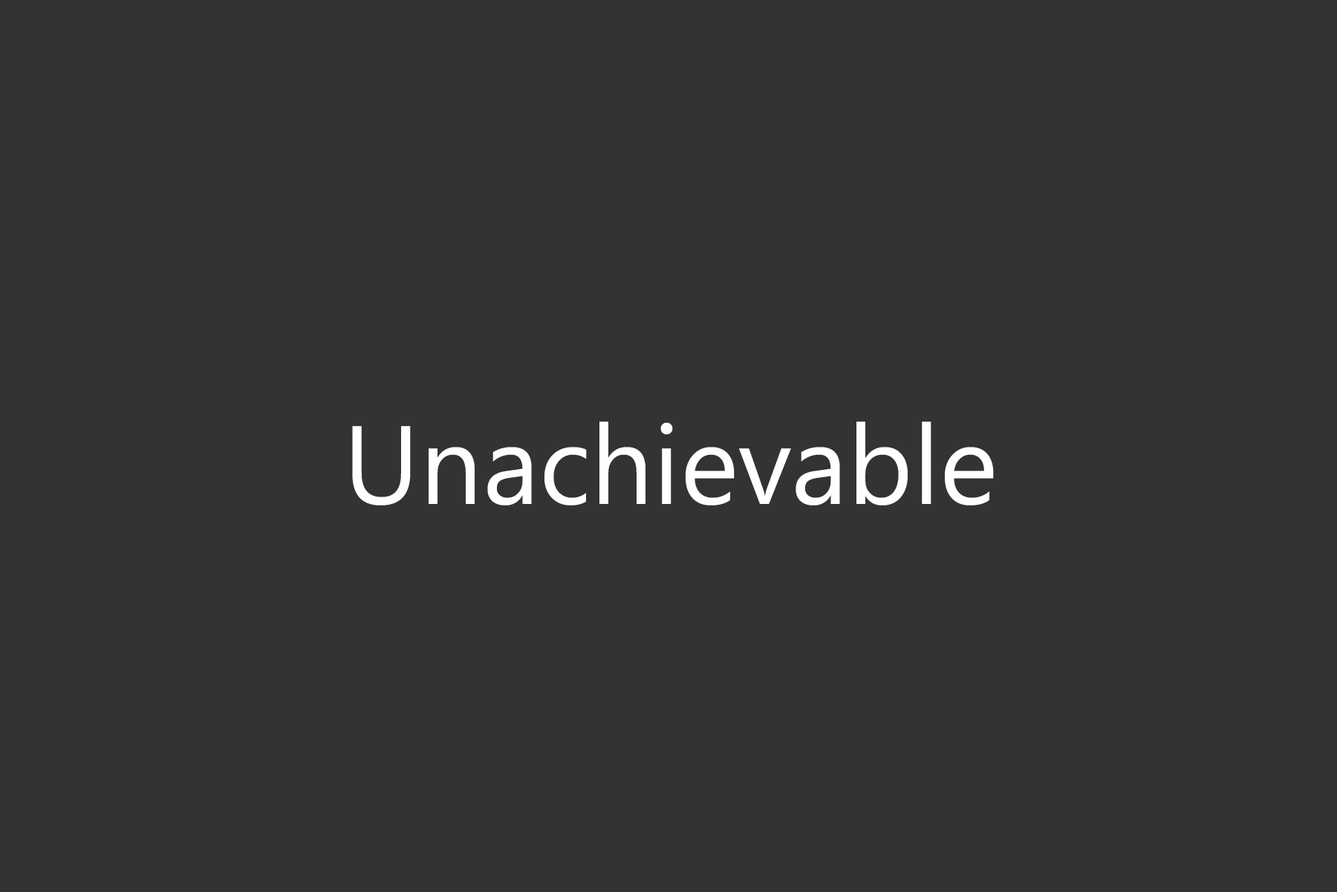
<style>
.page{position:relative;width:1337px;height:892px;background:#333333}
.page>*{position:absolute;margin:0}
.t1{font:111px "NirmalaUI";color:#ffffff}
</style>
<div class="page">
<p class="t1" style="left:352px;top:421px;width:642px;height:84px">Unachievable</p>
</div>
